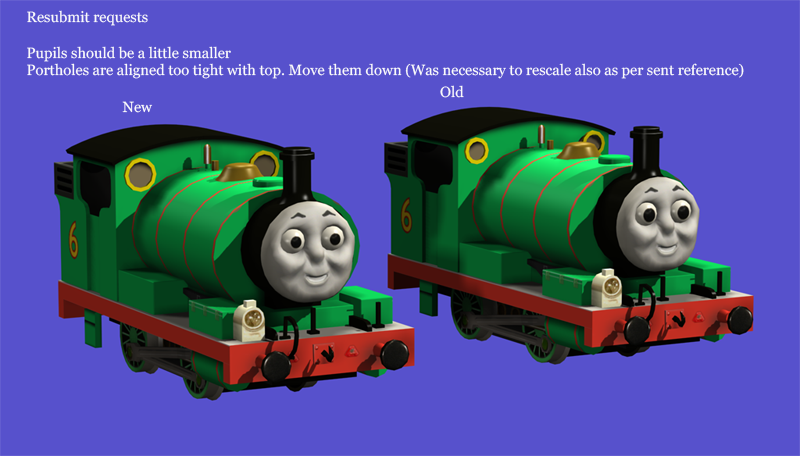
<style>
.page{position:relative;width:800px;height:456px;background:#5751cc}
.page>*{position:absolute;margin:0}
.t1{font:14.8px "Georgia";color:#fafafa}
</style>
<div class="page">
<p class="t1" style="left:27px;top:10px;width:717px;height:69px">Resubmit requests<br><br>Pupils should be a little smaller<br>Portholes are aligned too tight with top. Move them down (Was necessary to rescale also as per sent reference)</p>
<p class="t1" style="left:440px;top:85px;width:24px;height:13px">Old</p>
<p class="t1" style="left:122px;top:101px;width:31px;height:12px">New</p>
</div>
